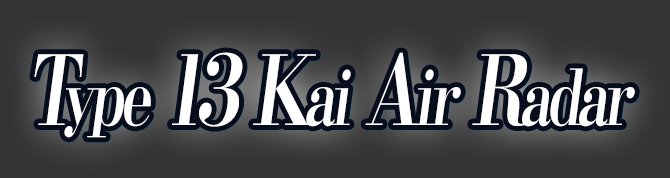
<style>
.page{position:relative;width:670px;height:178px;background:#333333}
.page>*{position:absolute;margin:0}
.t1{font:96px "KochoStd-Heavy";letter-spacing:-0.08em;color:#ffffff;font-style:italic;scale:0.75 1}
.t2{font:76.8px "KochoStd-Heavy";letter-spacing:-0.08em;color:#ffffff;font-style:italic;scale:0.75 1}
</style>
<div class="page">
<p class="t1" style="left:34px;top:52px;width:601px;height:86px">T<span class="t2">ype </span>13 K<span class="t2">ai</span> A<span class="t2">ir</span> R<span class="t2">adar</span></p>
</div>
